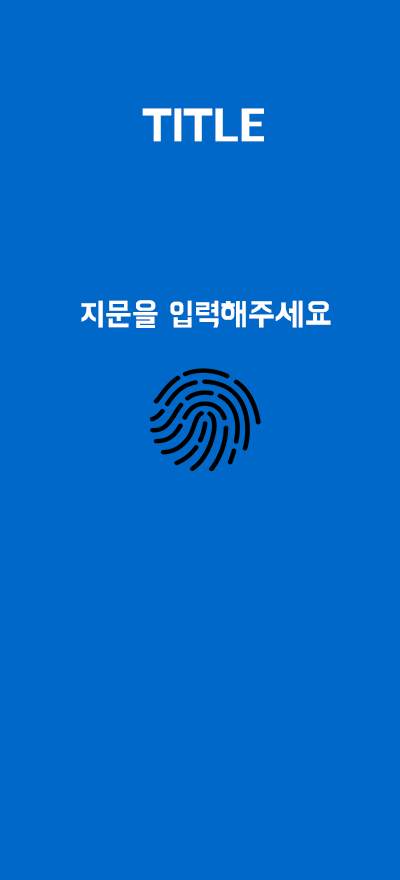
<style>
.page{position:relative;width:400px;height:880px;background:#0068c8}
.page>*{position:absolute;margin:0}
.t1{font:45px "BMHANNAPro";color:#ffffff}
.t2{font:32px "BMHANNAPro";color:#ffffff}
</style>
<div class="page">
<p class="t1" style="left:142px;top:108px;width:122px;height:34px">TITLE</p>
<p class="t2" style="left:81px;top:300px;width:250px;height:28px">지문을 입력해주세요</p>
</div>
